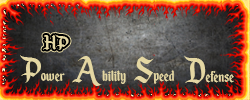
<style>
.page{position:relative;width:250px;height:100px}
.page>*{position:absolute;margin:0}
.t1{font:23.2px "EnchantedLand";color:#e4d7a3}
.t2{font:18px "EnchantedLand";color:#e4d7a3}
.t3{font:40px "EnchantedLand";color:#e4d7a3}
</style>
<div class="page">
<p class="t1" style="left:43px;top:34px;width:26px;height:16px">HP</p>
<p class="t1" style="left:43px;top:34px;width:26px;height:16px">HP</p>
<p class="t2" style="left:20px;top:55px;width:45px;height:28px"><span class="t3">P</span>ower</p>
<p class="t2" style="left:72px;top:56px;width:54px;height:30px"><span class="t3">A</span>bility</p>
<p class="t2" style="left:134px;top:56px;width:41px;height:28px"><span class="t3">S</span>peed</p>
<p class="t2" style="left:184px;top:55px;width:50px;height:29px"><span class="t3">D</span>efense</p>
</div>
